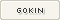
<style>
.page{position:relative;width:60px;height:20px;background:#f6f4ed}
.page>*{position:absolute;margin:0}
.t1{font:9px "Silkscreen";color:#383838}
</style>
<div class="page">
<p class="t1" style="left:17px;top:8px;width:26px;height:5px">gokin</p>
</div>
